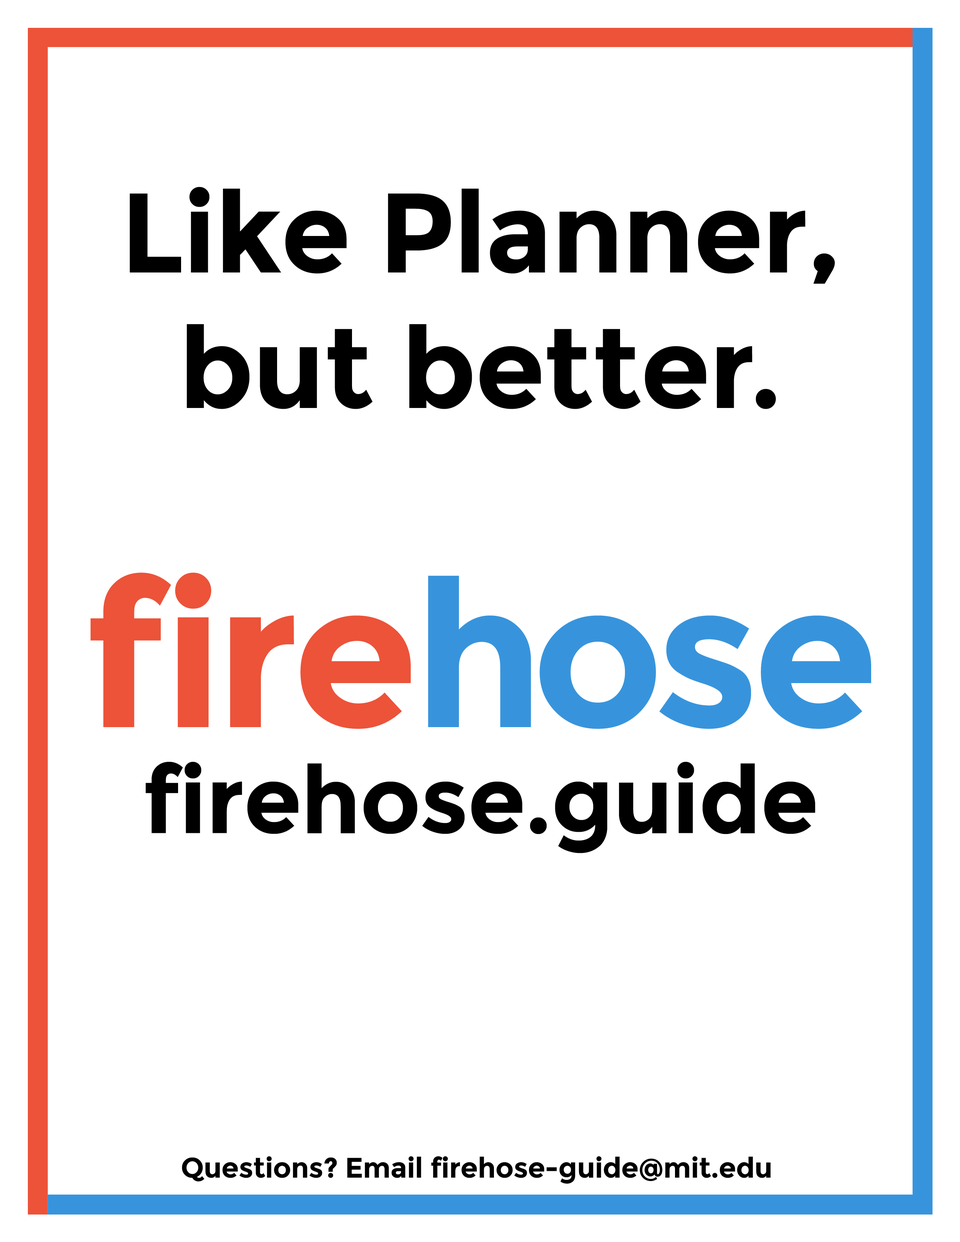
<style>
.page{position:relative;width:960px;height:1242px;background:#ffffff}
.page>*{position:absolute;margin:0}
.t1{font:112.9px "Montserrat-Bold";letter-spacing:-0.01em;color:#000000}
.t2{font:203.9px "Montserrat-Bold";letter-spacing:-0.01em;color:#ec5339}
.t3{font:203.9px "Montserrat-Bold";letter-spacing:-0.01em;color:#3794dc}
.t4{font:94.1px "Montserrat-Bold";letter-spacing:-0.01em;color:#000000}
.t5{font:28.2px "Montserrat-Bold";letter-spacing:-0.01em;color:#000000}
</style>
<div class="page">
<p class="t1" style="left:129px;top:187px;width:706px;height:222px;text-align:center">Like Planner,<br>but better.</p>
<p class="t2" style="left:90px;top:573px;width:781px;height:156px">fire<span class="t3">hose</span></p>
<p class="t4" style="left:146px;top:762px;width:669px;height:91px">firehose.guide</p>
<p class="t5" style="left:182px;top:1156px;width:589px;height:28px">Questions? Email firehose-guide@mit.edu</p>
</div>
